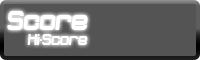
<style>
.page{position:relative;width:200px;height:60px;background:#545454}
.page>*{position:absolute;margin:0}
.t1{font:28.8px "Dopenakedfoulphatrelaxed";color:#ffffff}
.t2{font:16.2px "Dopenakedfoulphatrelaxed";color:#ffffff}
</style>
<div class="page">
<p class="t1" style="left:7px;top:11px;width:81px;height:19px">Score</p>
<p class="t2" style="left:27px;top:34px;width:61px;height:11px">Hi-Score</p>
</div>
